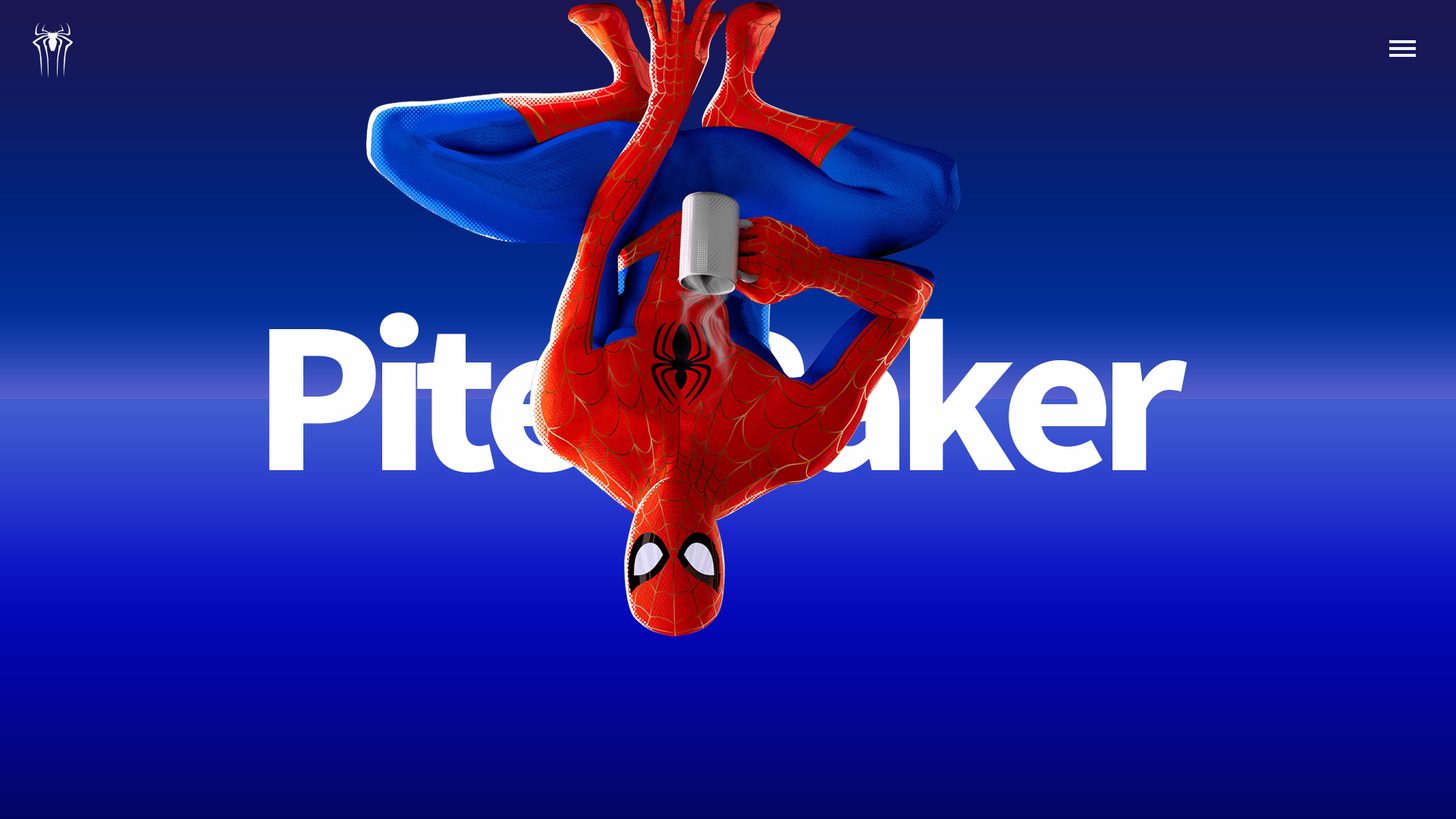
<style>
.page{position:relative;width:1456px;height:819px}
.page>*{position:absolute;margin:0}
.t1{font:189.4px "NotoSansKR-Black";letter-spacing:-0.08em;color:#fffefe}
</style>
<div class="page">
<p class="t1" style="left:269px;top:312px;width:918px;height:161px">Piter Paker</p>
</div>
